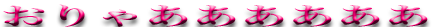
<style>
.page{position:relative;width:435px;height:27px;background:#ffffff}
.page>*{position:absolute;margin:0}
.t1{font:24px "HiraMinProN-W6";scale:2 1}
</style>
<div class="page">
<p class="t1" style="left:3px;top:4px;width:425px;height:23px">おりゃああああああ</p>
</div>
